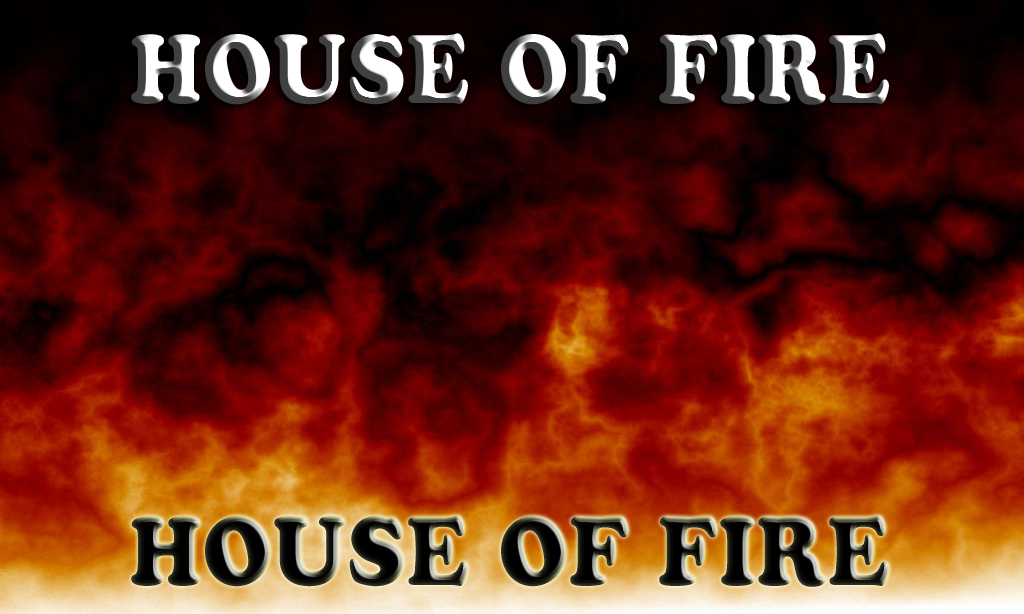
<style>
.page{position:relative;width:1024px;height:614px}
.page>*{position:absolute;margin:0}
.t1{font:96.8px "CooperBlackStd";letter-spacing:0.02em;scale:0.87 1}
</style>
<div class="page">
<p class="t1" style="left:131px;top:33px;width:758px;height:72px">HOUSE OF FIRE</p>
<p class="t1" style="left:131px;top:515px;width:758px;height:72px">HOUSE OF FIRE</p>
</div>
